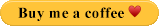
<style>
.page{position:relative;width:159px;height:26px;background:#ffc439}
.page>*{position:absolute;margin:0}
.t1{font:15px "TimesNewRomanPS-BoldMT";letter-spacing:0.025em;color:#000000}
.t2{font:13px "AppleColorEmoji";color:#000000}
</style>
<div class="page">
<p class="t1" style="left:18px;top:5px;width:123px;height:16px">Buy me a coffee <span class="t2">♥</span></p>
</div>
